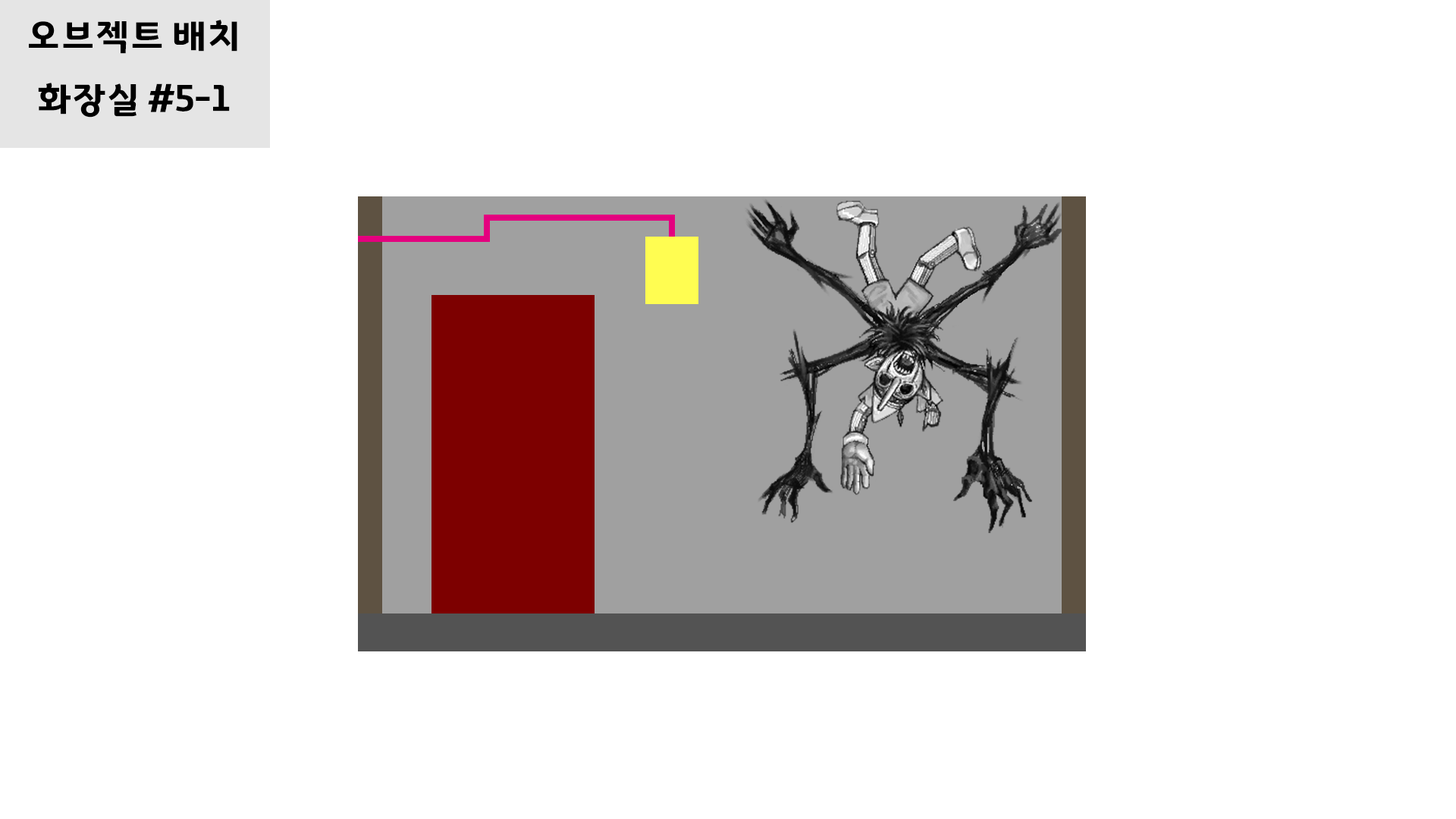
<style>
.page{position:relative;width:1456px;height:819px;background:#ffffff}
.page>*{position:absolute;margin:0}
.t1{font:36.4px "GyeonggiTitleV";letter-spacing:-0.05em;color:#000000}
</style>
<div class="page">
<p class="t1" style="left:29px;top:20px;width:208px;height:34px">오브젝트 배치</p>
<p class="t1" style="left:38px;top:83px;width:192px;height:35px">화장실 #5-1</p>
</div>
